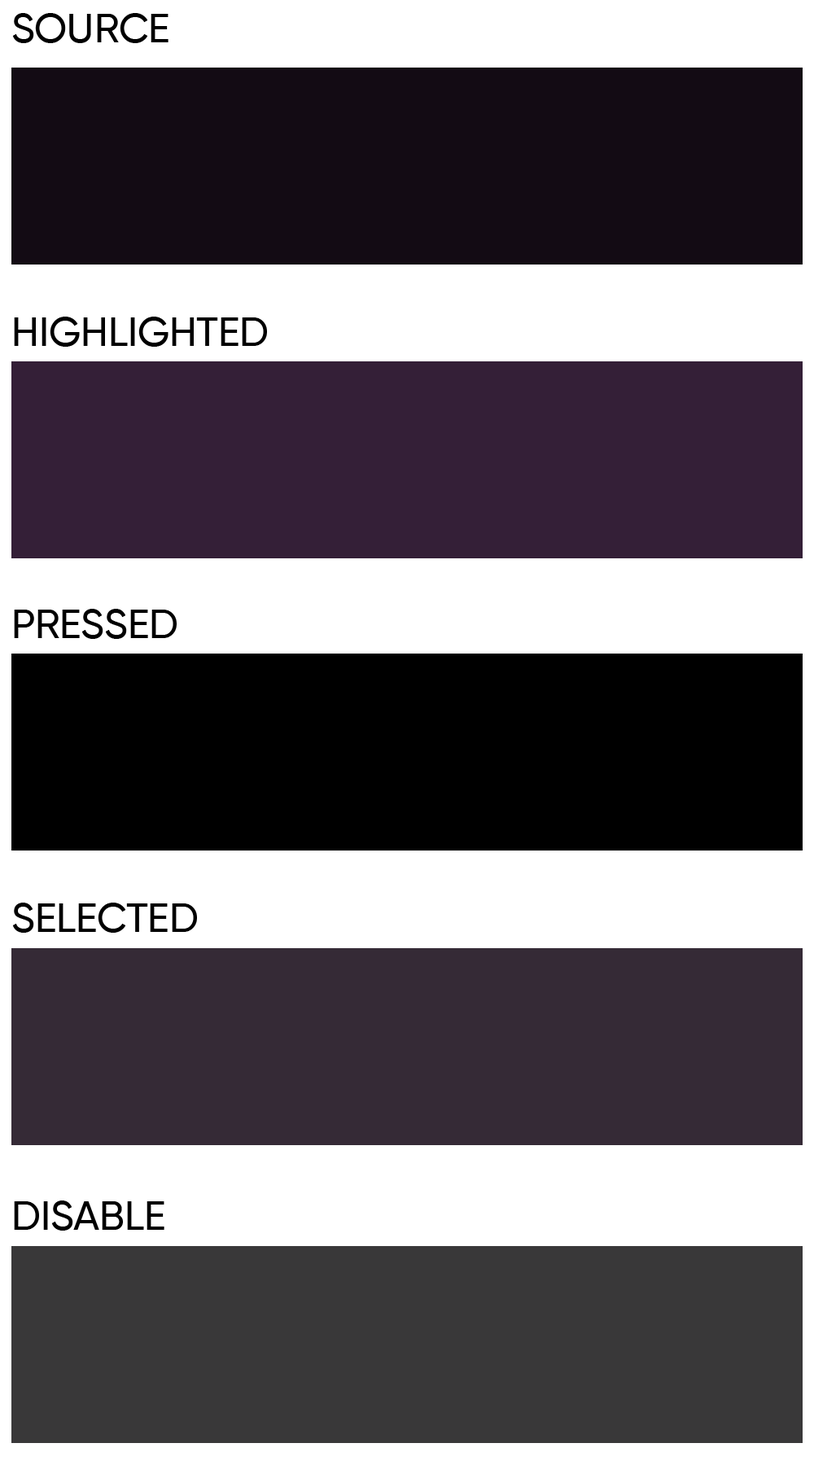
<style>
.page{position:relative;width:814px;height:1465px;background:#ffffff}
.page>*{position:absolute;margin:0}
.t1{font:40.7px "Gilroy-Medium";letter-spacing:0.008em;color:#000000}
</style>
<div class="page">
<p class="t1" style="left:12px;top:13px;width:156px;height:30px">SOURCE</p>
<p class="t1" style="left:14px;top:317px;width:253px;height:30px">HIGHLIGHTED</p>
<p class="t1" style="left:14px;top:609px;width:163px;height:30px">PRESSED</p>
<p class="t1" style="left:12px;top:903px;width:185px;height:30px">SELECTED</p>
<p class="t1" style="left:14px;top:1201px;width:150px;height:30px">DISABLE</p>
</div>
